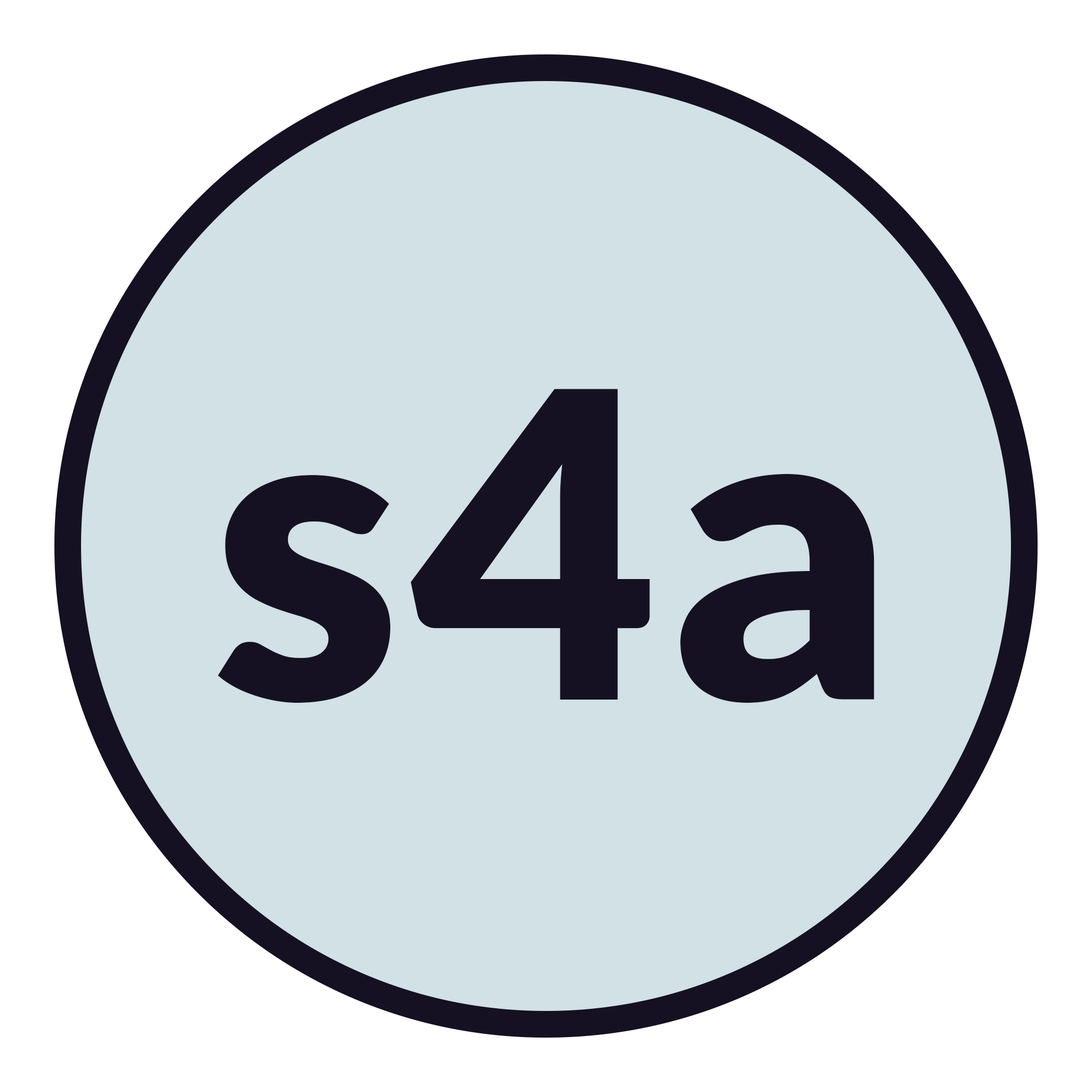
<style>
.page{position:relative;width:1092px;height:1092px;background:#d1e1e6}
.page>*{position:absolute;margin:0}
.t1{font:426.6px "Lato-Black";letter-spacing:0.02em;color:#151122}
</style>
<div class="page">
<p class="t1" style="left:218px;top:389px;width:656px;height:314px">s4a</p>
</div>
